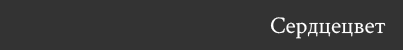
<style>
.page{position:relative;width:403px;height:50px;background:#333333}
.page>*{position:absolute;margin:0}
.t1{font:24px "CrimsonText-Regular";color:#ffffff}
</style>
<div class="page">
<p class="t1" style="left:270px;top:17px;width:116px;height:22px">Сердцецвет</p>
</div>
